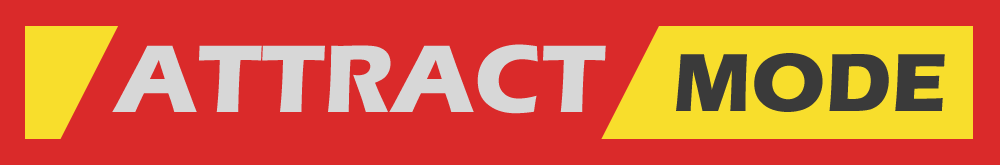
<style>
.page{position:relative;width:1000px;height:165px;background:#da2a2a}
.page>*{position:absolute;margin:0}
.t1{font:99.6px "ErasITC-Bold";color:#d7d7d7;text-transform:uppercase}
.t2{font:85.3px "ErasITC-Bold";color:#3a3a3a;text-transform:uppercase}
</style>
<div class="page">
<p class="t1" style="left:112px;top:44px;width:494px;height:70px">ATTRACT</p>
<p class="t2" style="left:676px;top:53px;width:269px;height:59px">MODE</p>
<p class="t2" style="left:678px;top:53px;width:269px;height:59px">MODE</p>
</div>
